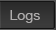
<style>
.page{position:relative;width:56px;height:30px}
.page>*{position:absolute;margin:0}
.t1{font:14px "HelveticaNeue";color:#aeacac}
</style>
<div class="page">
<p class="t1" style="left:10px;top:10px;width:30px;height:13px">Logs</p>
</div>
